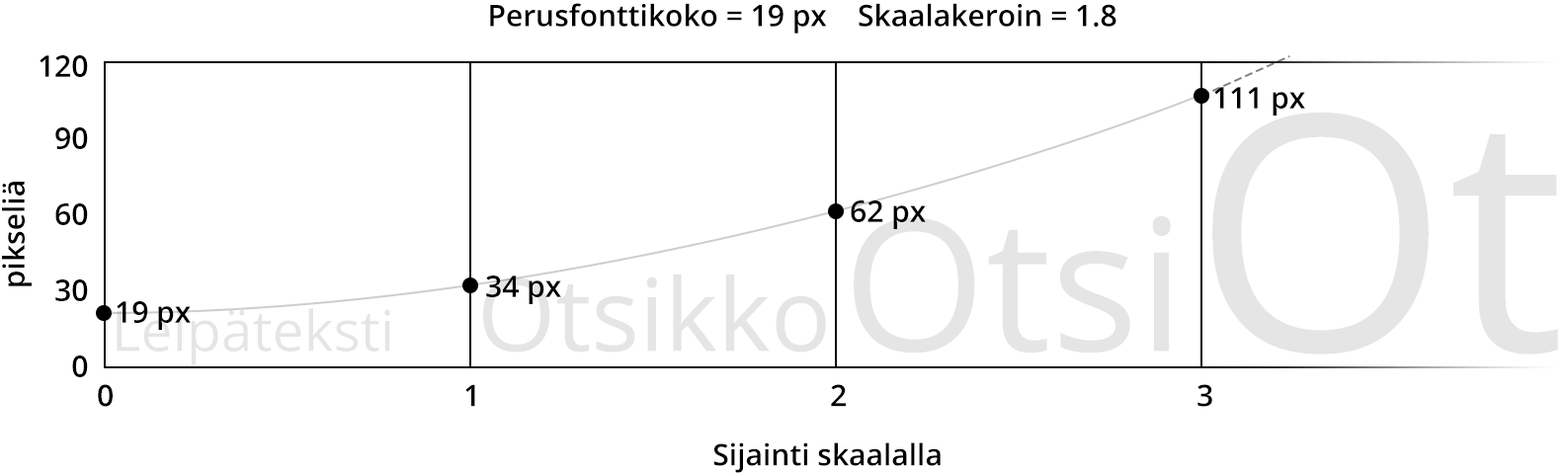
<style>
.page{position:relative;width:1568px;height:473px;background:#ffffff}
.page>*{position:absolute;margin:0}
.t1{font:29.6px "OpenSans-Semibold";color:#000000}
.t2{font:329px "OpenSans";color:#e5e5e5}
.t3{font:183.8px "OpenSans";color:#e5e5e5}
</style>
<div class="page">
<p class="t1" style="left:490px;top:3px;width:626px;height:31px">Perusfonttikoko = 19 px    Skaalakeroin = 1.8</p>
<p class="t1" style="left:40px;top:55px;width:48px;height:22px">120</p>
<p class="t1" style="left:1214px;top:87px;width:91px;height:29px">111 px</p>
<p class="t2" style="left:1212px;top:112px;width:346px;height:243px">Ot</p>
<p class="t1" style="left:55px;top:127px;width:33px;height:22px">90</p>
<p class="t1" style="left:2px;top:182px;width:30px;height:105px;rotate:-90deg">pikseliä</p>
<p class="t1" style="left:55px;top:204px;width:33px;height:21px">60</p>
<p class="t1" style="left:851px;top:201px;width:75px;height:28px">62 px</p>
<p class="t3" style="left:854px;top:215px;width:317px;height:139px">Otsi</p>
<p class="t1" style="left:55px;top:280px;width:33px;height:21px">30</p>
<p class="t1" style="left:486px;top:276px;width:75px;height:28px">34 px</p>
<p class="t1" style="left:117px;top:301px;width:74px;height:29px">19 px</p>
<p class="t1" style="left:72px;top:356px;width:16px;height:21px">0</p>
<p class="t1" style="left:98px;top:384px;width:1114px;height:23px">0 1 2 3</p>
<p class="t1" style="left:713px;top:443px;width:228px;height:30px">Sijainti skaalalla</p>
</div>
